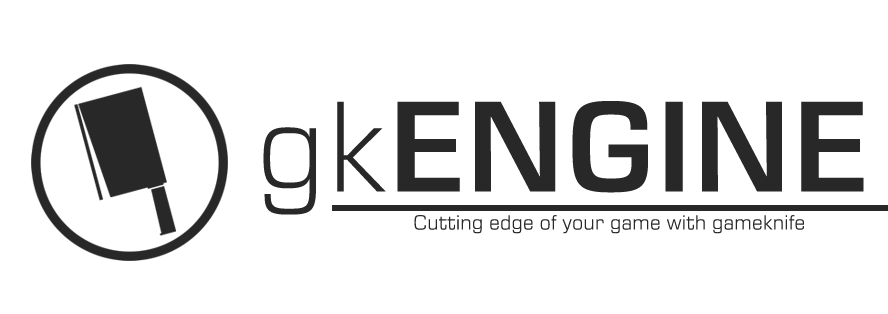
<style>
.page{position:relative;width:888px;height:314px;background:#ffffff}
.page>*{position:absolute;margin:0}
.t1{font:131.4px "EurostileNextLTPro-SmBd";letter-spacing:0.025em;color:#282828}
.t2{font:131.4px "EurostileNextLTPro-Light";letter-spacing:0.025em;color:#282828}
.t3{font:20.8px "EurostileNextLTPro-Light";letter-spacing:0.025em;color:#282828}
</style>
<div class="page">
<p class="t1" style="left:263px;top:101px;width:601px;height:114px"><span class="t2">gk</span>ENGINE</p>
<p class="t3" style="left:414px;top:215px;width:390px;height:19px">Cutting edge of your game with gameknife</p>
</div>
